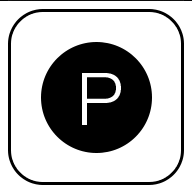
<style>
.page{position:relative;width:192px;height:192px;background:#ffffff}
.page>*{position:absolute;margin:0}
.t1{font:73.1px "HelveticaNeueLTPro-Lt";letter-spacing:0.025em;color:#ffffff}
</style>
<div class="page">
<p class="t1" style="left:82px;top:72px;width:39px;height:52px">P</p>
</div>
